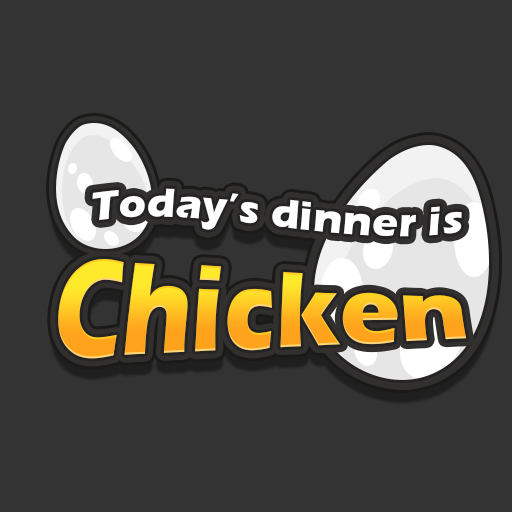
<style>
.page{position:relative;width:512px;height:512px;background:#333333}
.page>*{position:absolute;margin:0}
.t1{font:41.7px "ErasITC-Bold";letter-spacing:0.025em;color:#ffffff}
.t2{font:80px "ErasITC-Bold";letter-spacing:0.01em;scale:1.25 1}
</style>
<div class="page">
<p class="t1" style="left:92px;top:188px;width:370px;height:49px;rotate:2deg">Today’s dinner is</p>
<p class="t2" style="left:58px;top:259px;width:409px;height:100px">Chicken</p>
</div>
